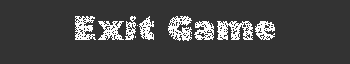
<style>
.page{position:relative;width:350px;height:64px;background:#333333}
.page>*{position:absolute;margin:0}
.t1{font:32px "GillSans-UltraBold";color:#ffffff}
</style>
<div class="page">
<p class="t1" style="left:75px;top:15px;width:200px;height:26px;opacity:0.75">Exit Game</p>
</div>
